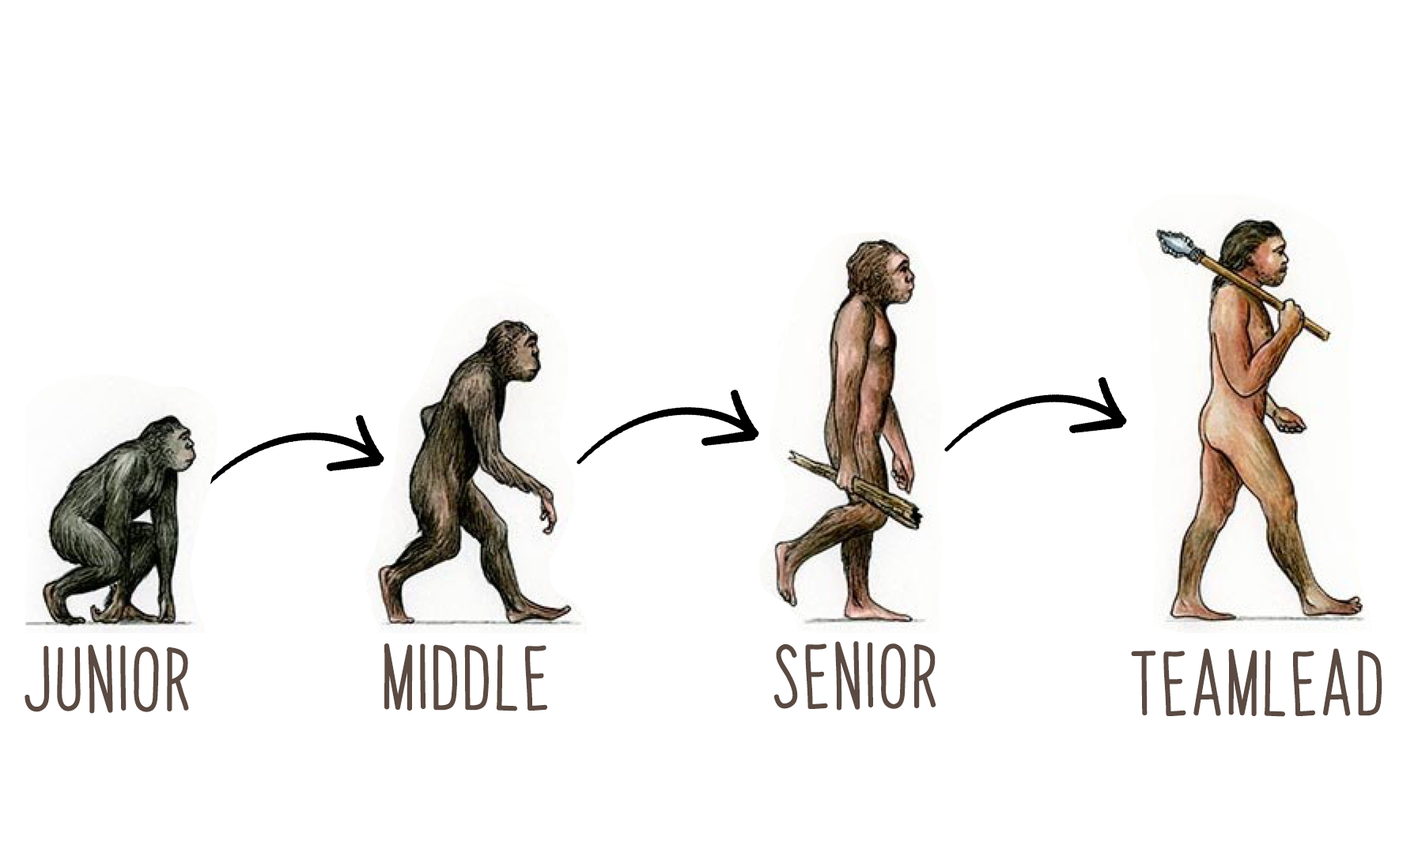
<style>
.page{position:relative;width:1418px;height:841px;background:#ffffff}
.page>*{position:absolute;margin:0}
.t1{font:55.3px "PapayaSunrise";color:#594a42;font-weight:bold}
</style>
<div class="page">
<p class="t1" style="left:773px;top:641px;width:163px;height:70px">senior</p>
<p class="t1" style="left:25px;top:644px;width:164px;height:70px">JUnior</p>
<p class="t1" style="left:384px;top:644px;width:163px;height:68px">middle</p>
<p class="t1" style="left:1131px;top:648px;width:251px;height:69px">teamlead</p>
</div>
